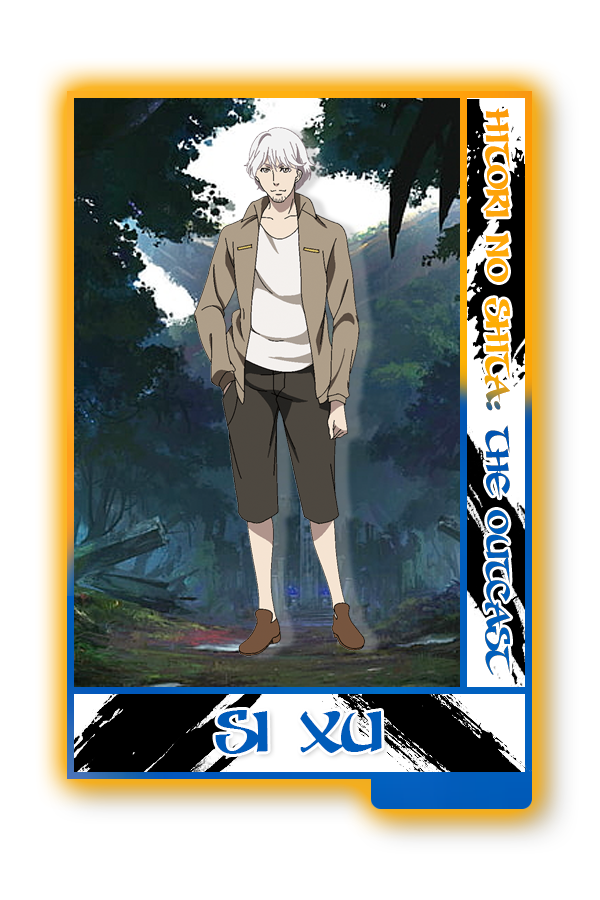
<style>
.page{position:relative;width:600px;height:900px;background:#ffffff}
.page>*{position:absolute;margin:0}
.t1{font:36.7px "SevenSwordsmenBB"}
.t2{font:64.5px "SevenSwordsmenBB";color:#005bb9}
</style>
<div class="page">
<p class="t1" style="left:483px;top:108px;width:28px;height:567px;rotate:90deg">HITORI NO SHITA: THE OUTCAST</p>
<p class="t2" style="left:215px;top:710px;width:167px;height:44px">SI XU</p>
</div>
